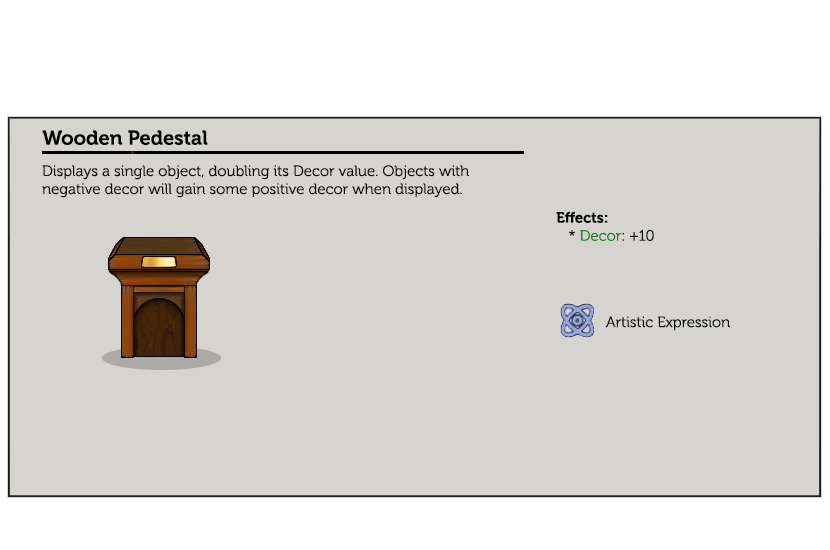
<style>
.page{position:relative;width:830px;height:550px;background:#d6d4cf}
.page>*{position:absolute;margin:0}
.t1{font:20px "Museo-700";color:#000000}
.t2{font:15px "Museo-300";color:#000000}
.t3{font:15px "Museo-700";color:#000000}
.t4{font:15px "Museo-300";color:#247d1a}
.t5{font:15px "Museo-300";color:#020202}
</style>
<div class="page">
<p class="t1" style="left:42px;top:130px;width:166px;height:15px">Wooden Pedestal</p>
<p class="t2" style="left:42px;top:165px;width:427px;height:33px">Displays a single object, doubling its Decor value. Objects with negative decor will gain some positive decor when displayed.</p>
<p class="t3" style="left:556px;top:211px;width:98px;height:30px">Effects:<br><span class="t2">   * </span><span class="t4">Decor</span><span class="t2">: +10</span></p>
<p class="t5" style="left:605px;top:316px;width:125px;height:15px">Artistic Expression</p>
</div>
